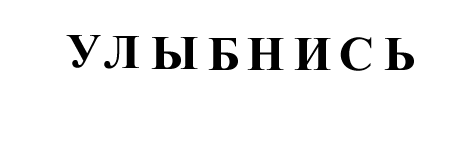
<style>
.page{position:relative;width:454px;height:142px;background:#ffffff}
.page>*{position:absolute;margin:0}
.t1{font:48px "TimesNewRomanPS-BoldMT";color:#000000}
</style>
<div class="page">
<p class="t1" style="left:66px;top:35px;width:35px;height:33px">У</p>
<p class="t1" style="left:104px;top:36px;width:35px;height:33px">Л</p>
<p class="t1" style="left:151px;top:37px;width:47px;height:32px">Ы</p>
<p class="t1" style="left:208px;top:38px;width:30px;height:32px">Б</p>
<p class="t1" style="left:247px;top:38px;width:37px;height:32px">Н</p>
<p class="t1" style="left:294px;top:38px;width:37px;height:32px">И</p>
<p class="t1" style="left:340px;top:37px;width:32px;height:34px">С</p>
<p class="t1" style="left:384px;top:38px;width:30px;height:32px">Ь</p>
</div>
